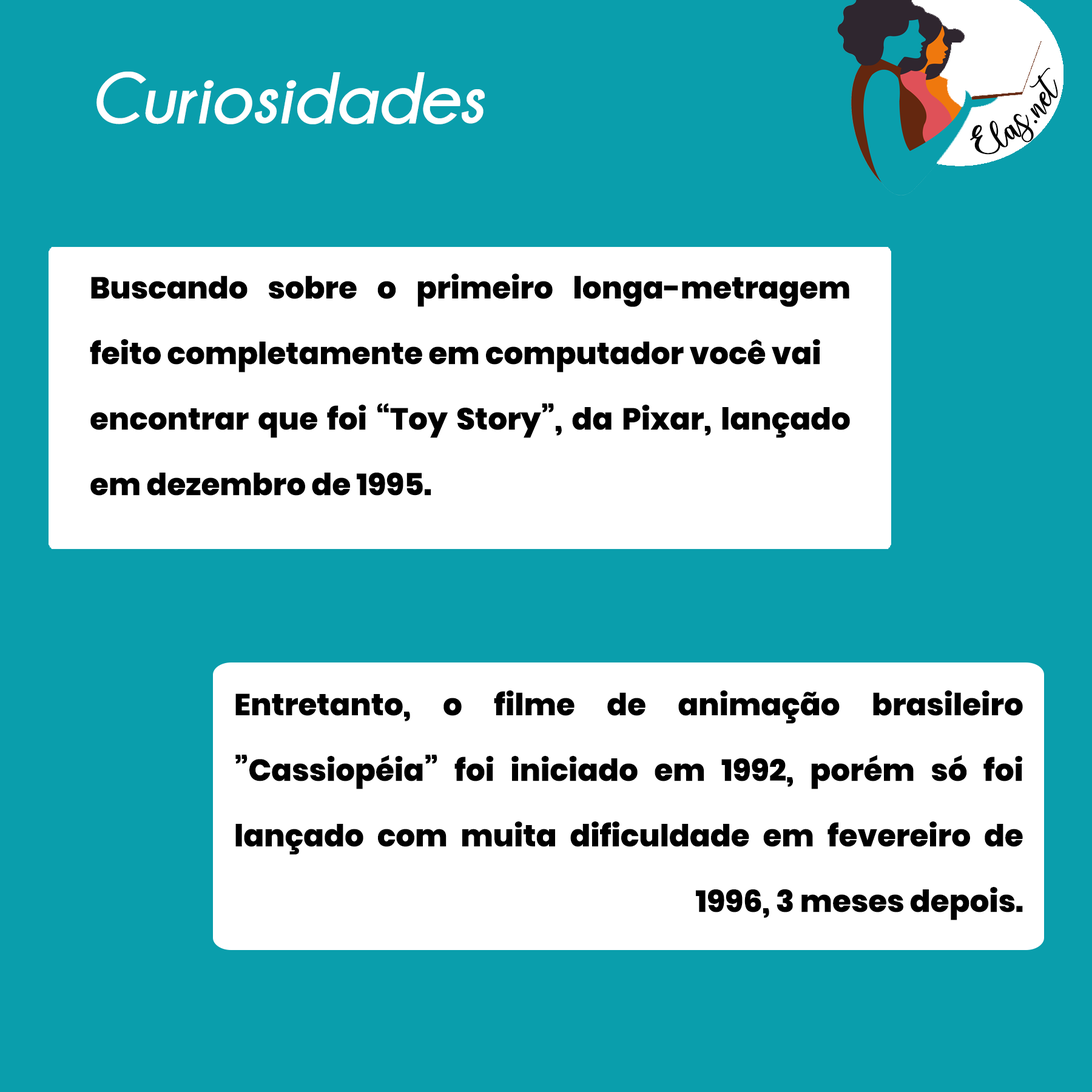
<style>
.page{position:relative;width:1092px;height:1092px;background:#0a9eac}
.page>*{position:absolute;margin:0}
.t1{font:72.8px "Champagne&Limousines-BoldItalic";color:#ffffff}
.t2{font:30.3px/65.5px "Poppins-ExtraBold";color:#000000}
</style>
<div class="page">
<p class="t1" style="left:96px;top:72px;width:389px;height:52px">Curiosidades</p>
<p class="t2" style="left:90px;top:274px;width:760px;height:222px;text-align:justify">Buscando sobre o primeiro longa-metragem feito completamente em computador você vai<br>encontrar que foi “Toy Story”, da Pixar, lançado em dezembro de 1995.</p>
<p class="t2" style="left:235px;top:690px;width:788px;height:230px;text-align:justify">Entretanto, o filme de animação brasileiro ”Cassiopéia” foi iniciado em 1992, porém só foi lançado com muita dificuldade em fevereiro de 1996, 3 meses depois.</p>
</div>
